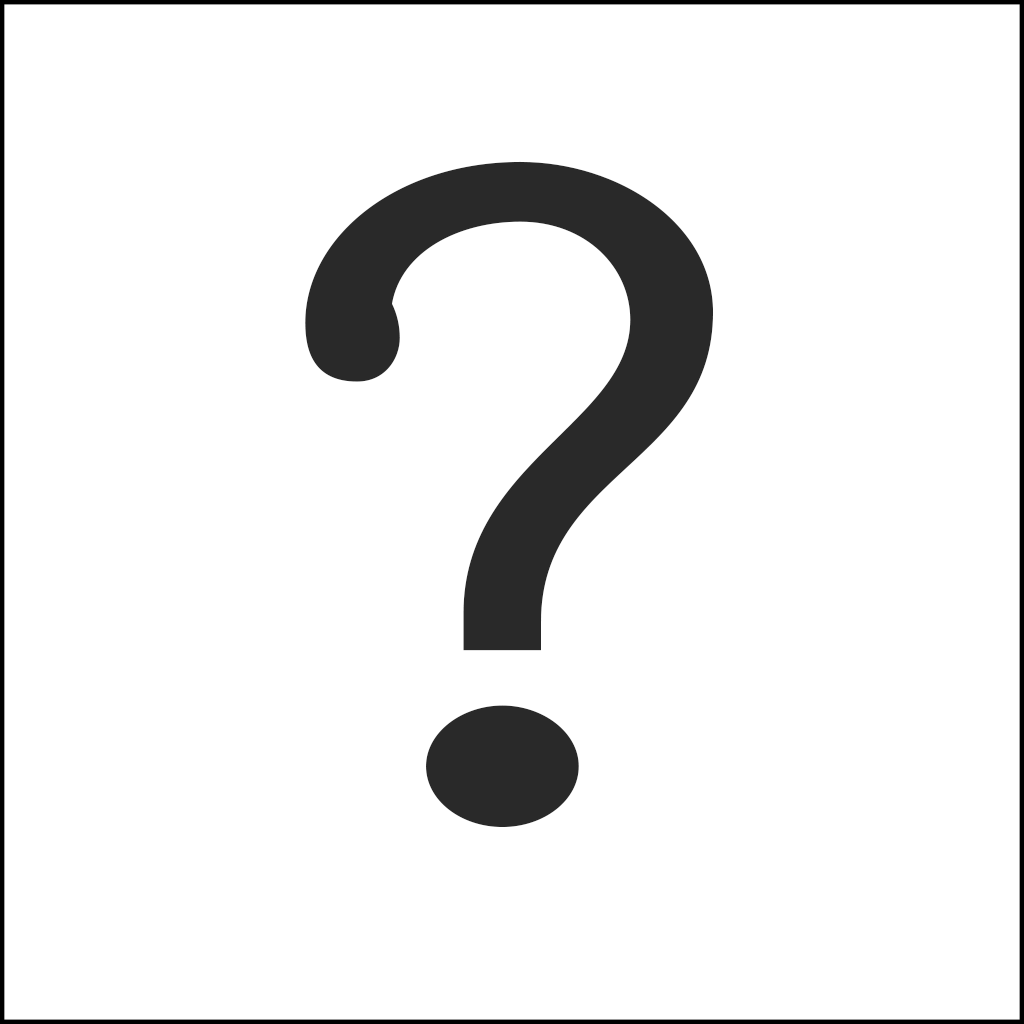
<style>
.page{position:relative;width:1024px;height:1024px;background:#ffffff}
.page>*{position:absolute;margin:0}
.t1{font:1065.3px "PrestigeEliteStd-Bd";letter-spacing:-0.075em;color:#292929;scale:1.21 1}
</style>
<div class="page">
<p class="t1" style="left:305px;top:161px;width:409px;height:666px">?</p>
</div>
